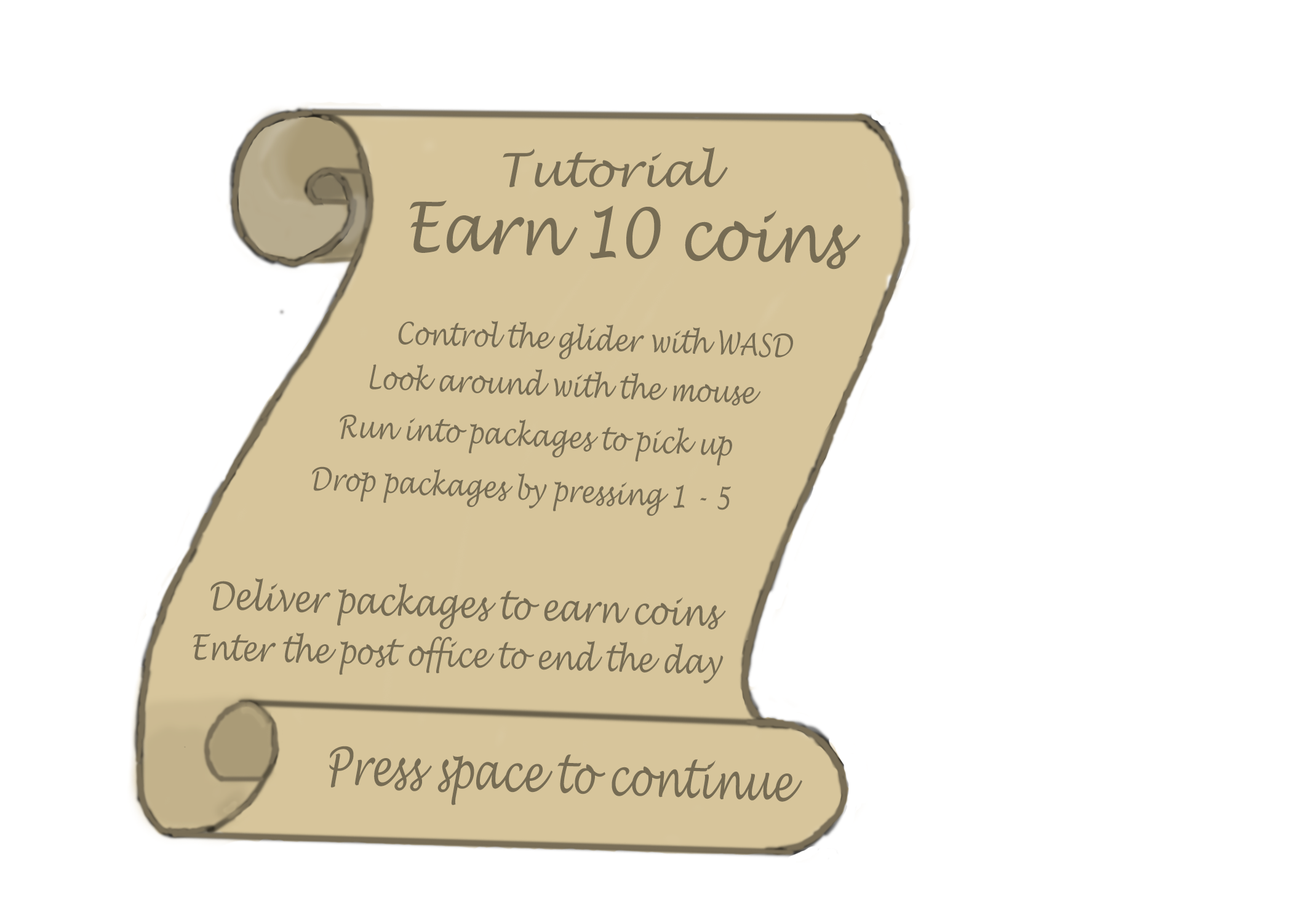
<style>
.page{position:relative;width:1292px;height:923px;background:#ffffff}
.page>*{position:absolute;margin:0}
.t1{font:46.1px "LucidaHandwriting-Italic";color:#766c54}
.t2{font:69px "LucidaHandwriting-Italic";color:#766c54;scale:0.83 1}
.t3{font:30.8px "LucidaHandwriting-Italic";color:#766c54;scale:0.78 1}
.t4{font:37.8px "LucidaHandwriting-Italic";color:#766c54;scale:0.78 1}
.t5{font:34.7px "LucidaHandwriting-Italic";color:#766c54;scale:0.78 1}
.t6{font:51.3px "LucidaHandwriting-Italic";color:#766c54;scale:0.71 1}
</style>
<div class="page">
<p class="t1" style="left:503px;top:146px;width:225px;height:42px">Tutorial</p>
<p class="t2" style="left:410px;top:200px;width:451px;height:69px;rotate:2deg">Earn 10 coins</p>
<p class="t3" style="left:398px;top:321px;width:395px;height:38px;rotate:2deg">Control the glider with WASD</p>
<p class="t3" style="left:370px;top:364px;width:391px;height:41px;rotate:2deg">Look around with the mouse</p>
<p class="t3" style="left:340px;top:414px;width:392px;height:52px;rotate:3deg">Run into packages to pick up</p>
<p class="t3" style="left:312px;top:466px;width:419px;height:50px;rotate:3deg">Drop packages by pressing 1 - 5</p>
<p class="t4" style="left:210px;top:578px;width:516px;height:51px;rotate:2deg">Deliver packages to earn coins</p>
<p class="t5" style="left:193px;top:632px;width:531px;height:52px;rotate:2deg">Enter the post office to end the day</p>
<p class="t6" style="left:329px;top:746px;width:473px;height:59px;rotate:2deg">Press space to continue</p>
</div>
